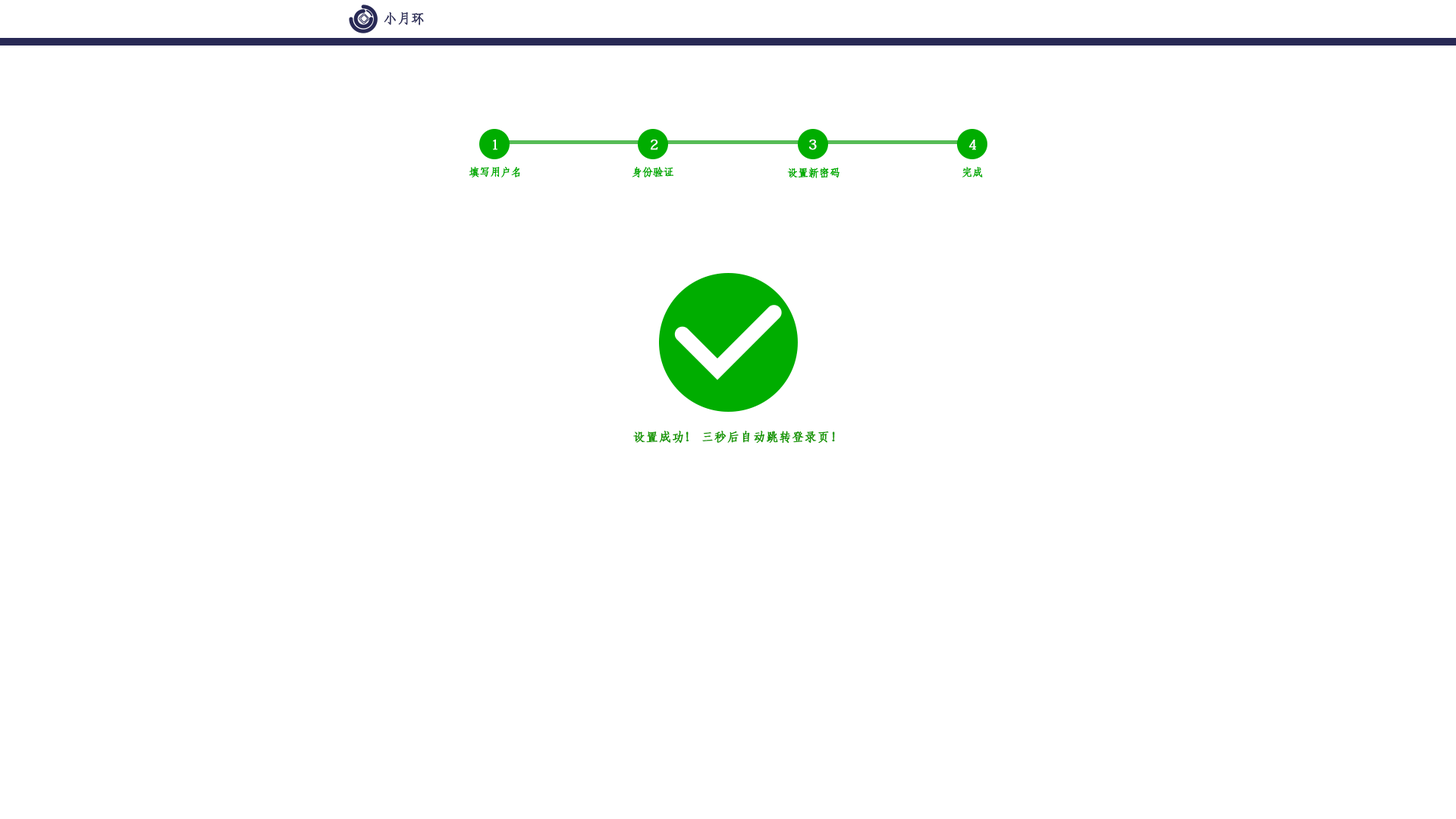
<style>
.page{position:relative;width:1456px;height:819px;background:#ffffff}
.page>*{position:absolute;margin:0}
.t1{font:13.4px "AdobeFangsongStd-Regular";color:#35365f;font-weight:bold}
.t2{font:13.6px "AdobeFangsongStd-Regular";color:#ffffff;font-weight:bold}
.t3{font:10.6px "AdobeFangsongStd-Regular";color:#00ad00;font-weight:bold}
.t4{font:12.1px "AdobeFangsongStd-Regular";color:#1a9905;font-weight:bold}
</style>
<div class="page">
<p class="t1" style="left:384px;top:12px;width:40px;height:14px">小月环</p>
<p class="t2" style="left:493px;top:139px;width:4px;height:11px">1</p>
<p class="t2" style="left:651px;top:140px;width:7px;height:10px">2</p>
<p class="t2" style="left:809px;top:140px;width:8px;height:10px">3</p>
<p class="t2" style="left:969px;top:140px;width:8px;height:10px">4</p>
<p class="t3" style="left:469px;top:167px;width:51px;height:11px">填写用户名</p>
<p class="t3" style="left:632px;top:167px;width:42px;height:11px">身份验证</p>
<p class="t3" style="left:787px;top:167px;width:52px;height:11px">设置新密码</p>
<p class="t3" style="left:962px;top:167px;width:21px;height:10px">完成</p>
<p class="t4" style="left:633px;top:431px;width:202px;height:13px">设置成功！ 三秒后自动跳转登录页！</p>
</div>
